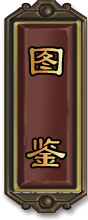
<style>
.page{position:relative;width:88px;height:220px}
.page>*{position:absolute;margin:0}
.t1{font:46.1px "LiSu";scale:0.9 1}
</style>
<div class="page">
<p class="t1" style="left:27px;top:48px;width:39px;height:119px">图  鉴</p>
</div>
